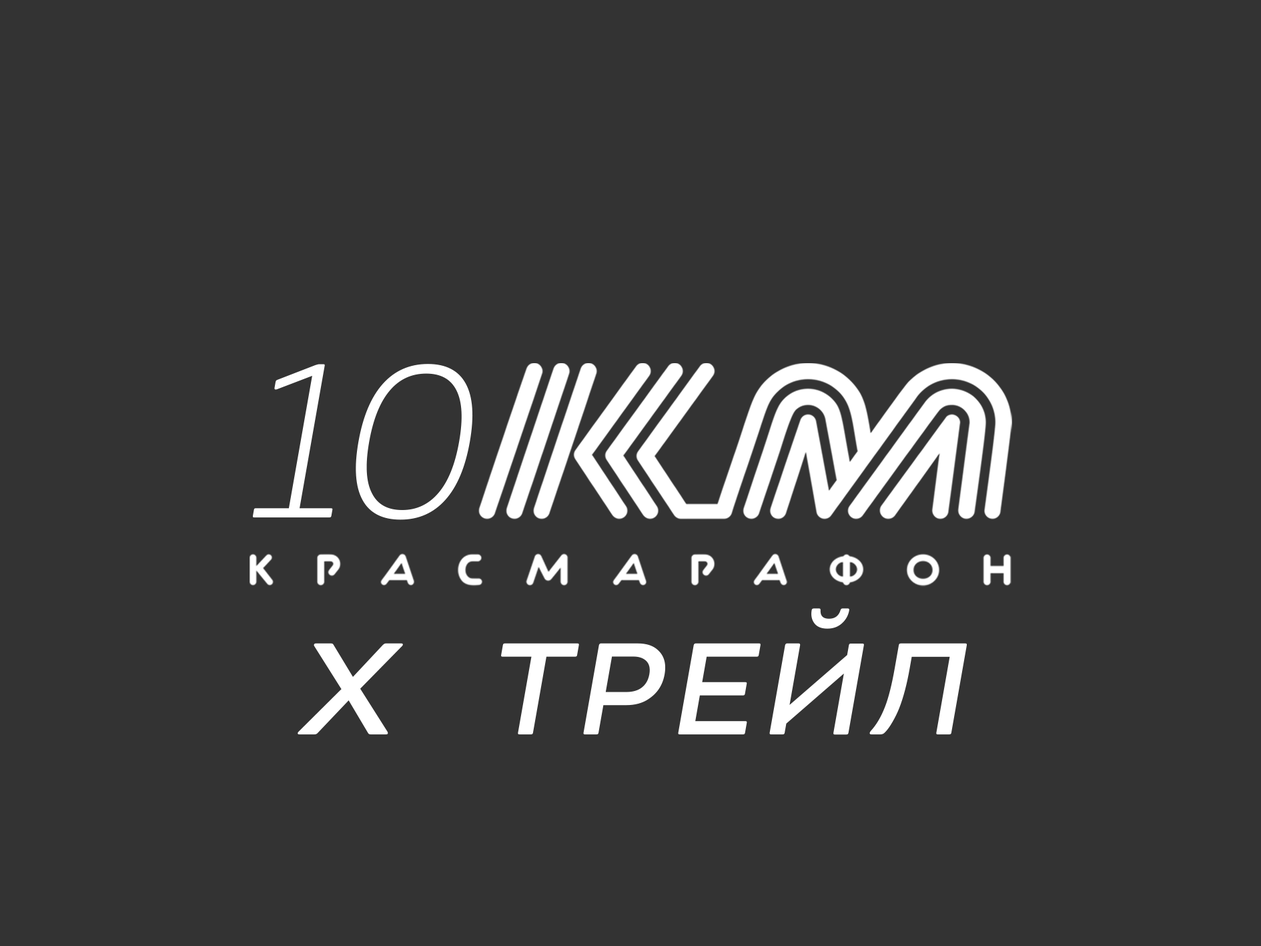
<style>
.page{position:relative;width:1261px;height:946px;background:#333333}
.page>*{position:absolute;margin:0}
.t1{font:222px "HouschkaPro-Light";letter-spacing:-0.1em;color:#ffffff;font-style:italic}
.t2{font:133.5px "HouschkaPro-DemiBold";letter-spacing:0.075em;color:#ffffff;font-style:italic}
</style>
<div class="page">
<p class="t1" style="left:252px;top:364px;width:221px;height:156px">10</p>
<p class="t2" style="left:298px;top:608px;width:670px;height:127px">Х  ТРЕЙЛ</p>
</div>
